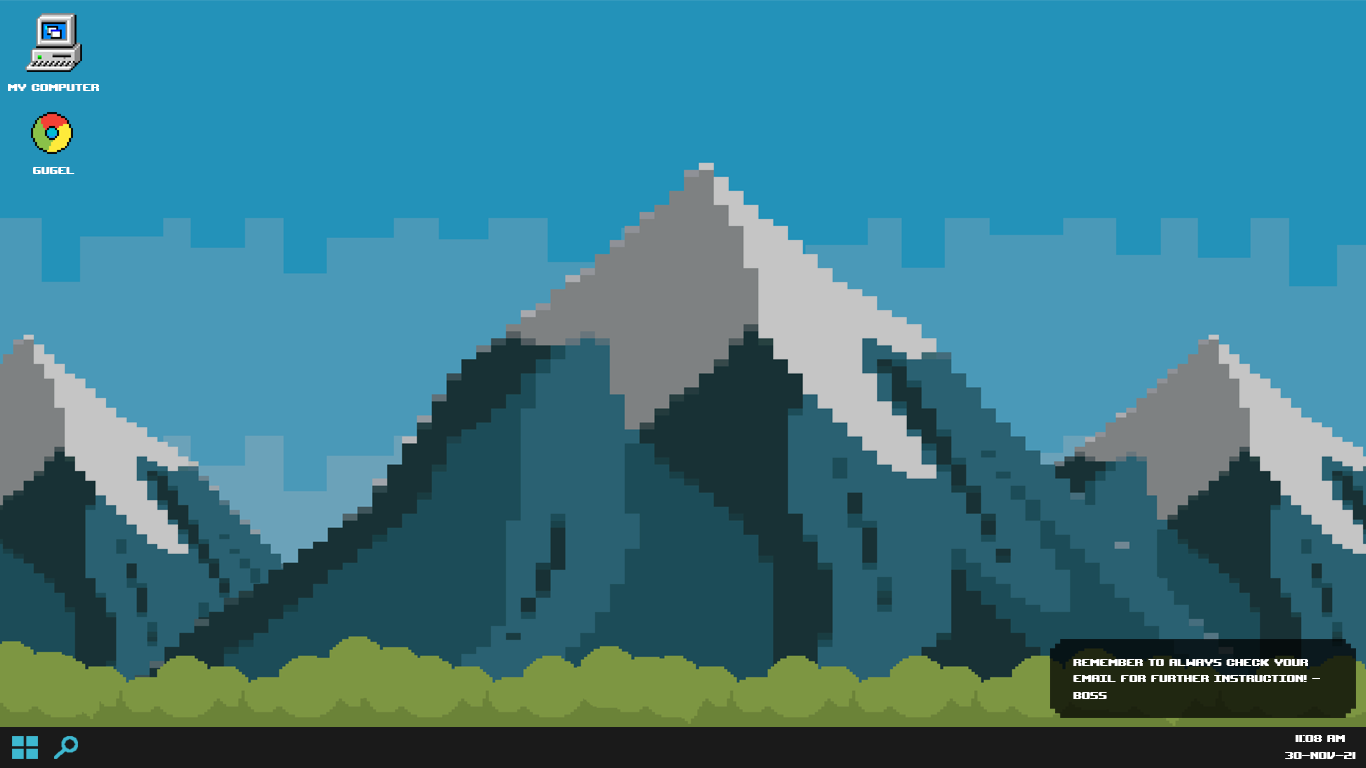
<style>
.page{position:relative;width:1366px;height:768px;background:#2392b9}
.page>*{position:absolute;margin:0}
.t1{font:14px "UpheavalTT-BRK-";color:#ffffff}
</style>
<div class="page">
<p class="t1" style="left:8px;top:84px;width:91px;height:7px">my computer</p>
<p class="t1" style="left:33px;top:167px;width:42px;height:7px">gugel</p>
<p class="t1" style="left:1073px;top:659px;width:247px;height:40px">remember to always check your email for further instruction! - boss</p>
<p class="t1" style="left:1285px;top:735px;width:71px;height:24px;text-align:center">11:08 am<br>30-nov-21</p>
</div>
